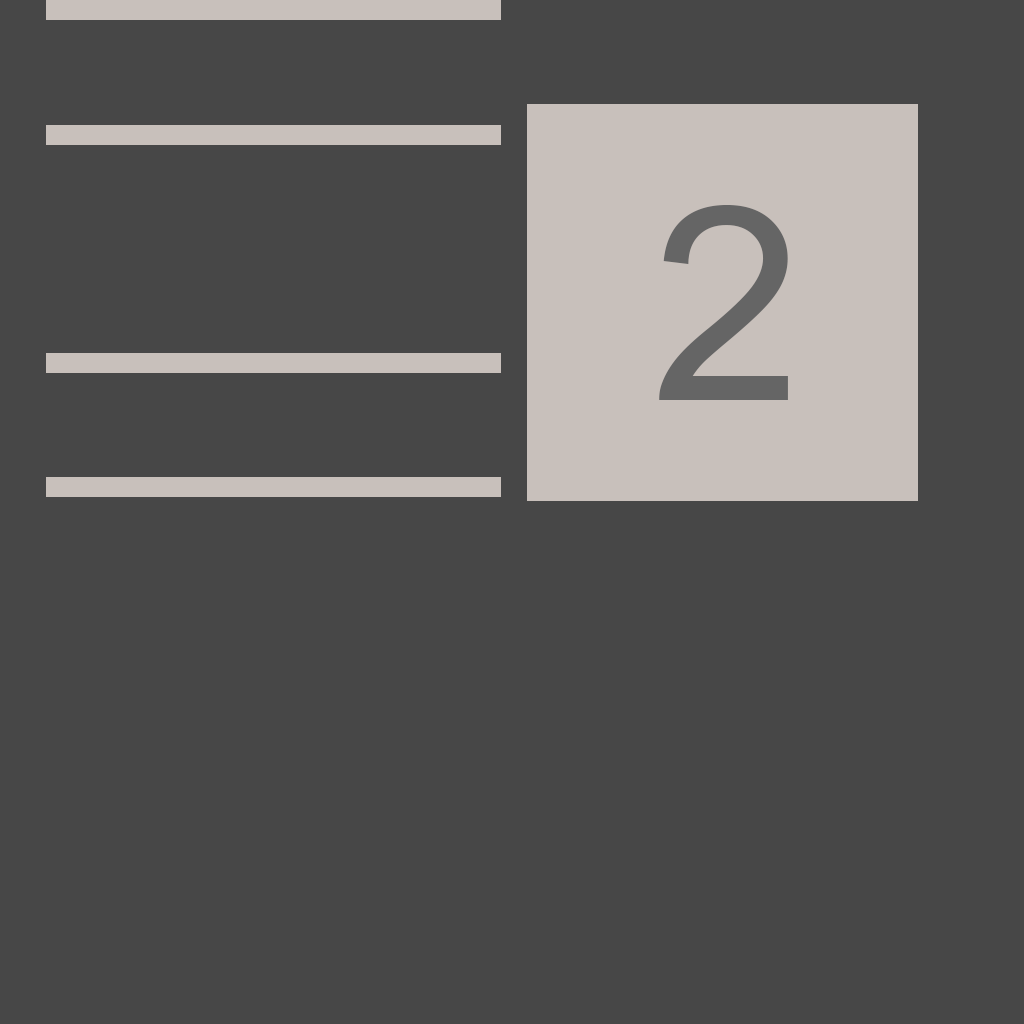
<style>
.page{position:relative;width:1024px;height:1024px;background:#474747}
.page>*{position:absolute;margin:0}
.t1{font:272px "ArialMT";color:#656565}
</style>
<div class="page">
<p class="t1" style="left:659px;top:205px;width:129px;height:195px">2</p>
</div>
